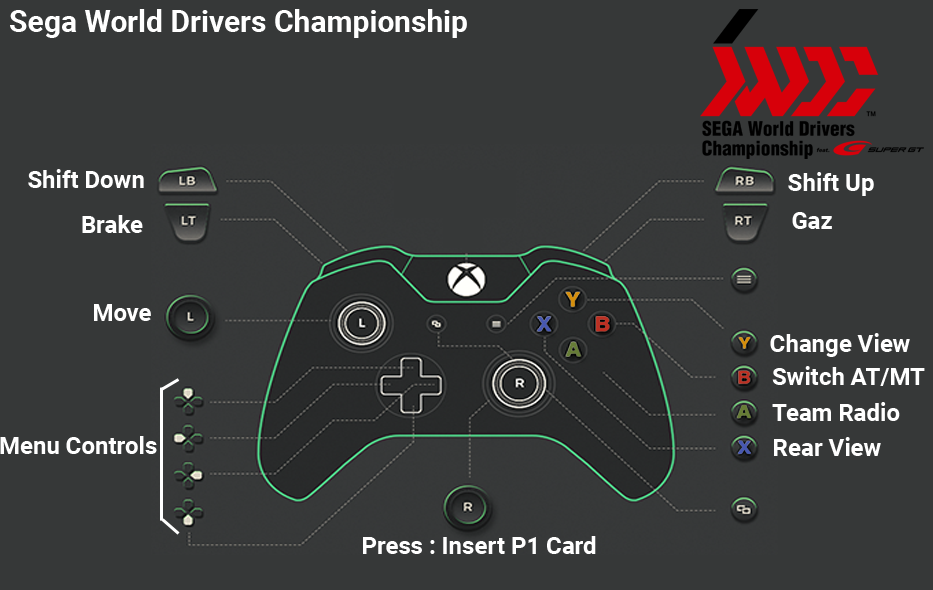
<style>
.page{position:relative;width:933px;height:590px;background:#363838}
.page>*{position:absolute;margin:0}
.t1{font:30px "Roboto-Bold";color:#ffffff}
.t2{font:24px "Roboto-Bold";color:#ffffff}
</style>
<div class="page">
<p class="t1" style="left:10px;top:9px;width:457px;height:29px">Sega World Drivers Championship</p>
<p class="t2" style="left:28px;top:169px;width:116px;height:19px">Shift Down</p>
<p class="t2" style="left:788px;top:172px;width:86px;height:24px">Shift Up</p>
<p class="t2" style="left:82px;top:215px;width:61px;height:18px">Brake</p>
<p class="t2" style="left:792px;top:212px;width:40px;height:17px">Gaz</p>
<p class="t2" style="left:94px;top:304px;width:57px;height:17px">Move</p>
<p class="t2" style="left:770px;top:333px;width:140px;height:24px">Change View</p>
<p class="t2" style="left:772px;top:366px;width:153px;height:20px">Switch AT/MT</p>
<p class="t2" style="left:772px;top:402px;width:128px;height:19px">Team Radio</p>
<p class="t2" style="left:0px;top:436px;width:157px;height:18px">Menu Controls</p>
<p class="t2" style="left:774px;top:437px;width:107px;height:19px">Rear View</p>
<p class="t2" style="left:363px;top:536px;width:233px;height:18px">Press : Insert P1 Card</p>
</div>
